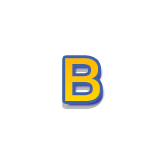
<style>
.page{position:relative;width:164px;height:164px;background:#ffffff}
.page>*{position:absolute;margin:0}
.t1{font:59.8px "PingFangHK-Semibold";color:#ffc600;text-transform:uppercase}
</style>
<div class="page">
<p class="t1" style="left:65px;top:58px;width:35px;height:43px">b</p>
</div>
